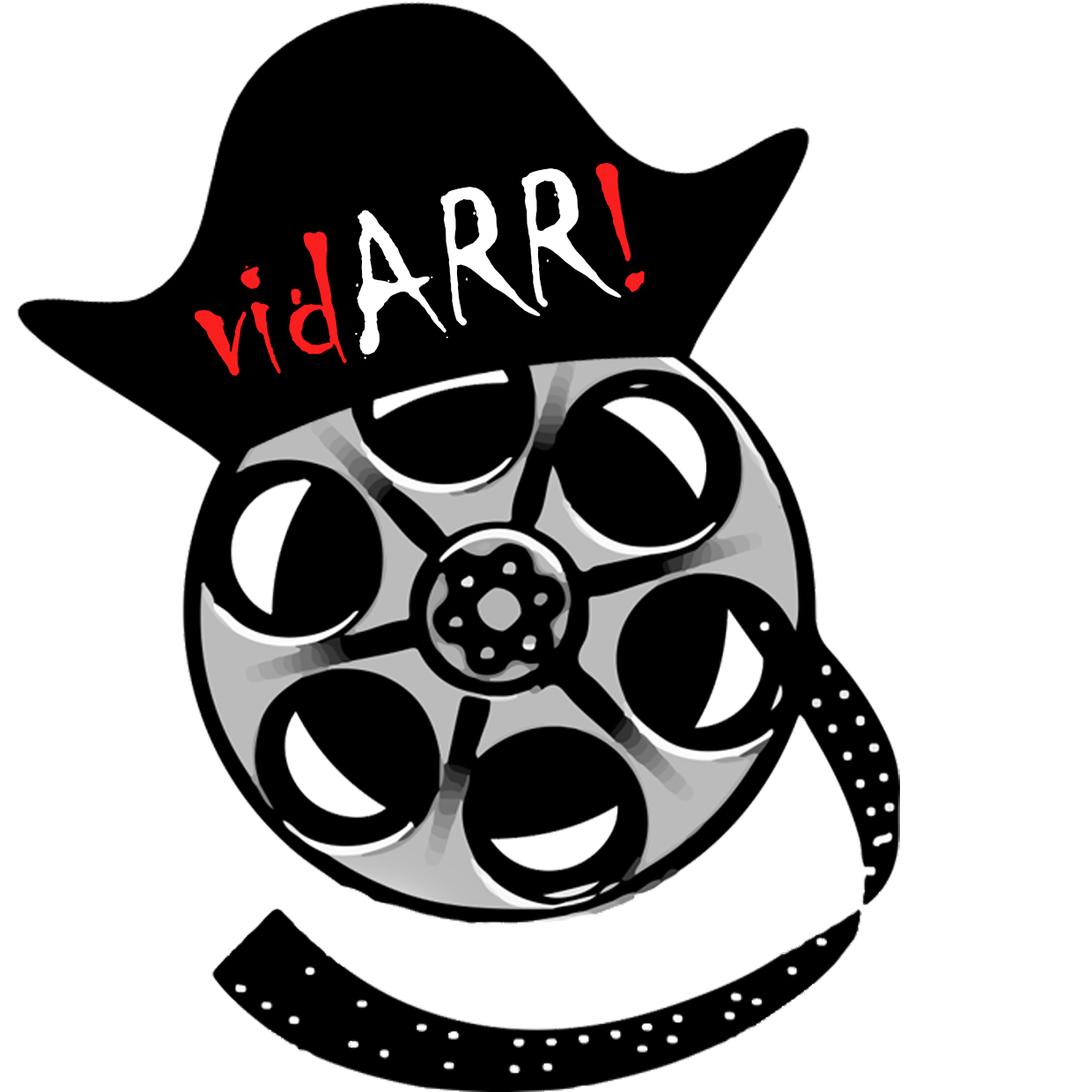
<style>
.page{position:relative;width:1092px;height:1092px;background:#ffffff}
.page>*{position:absolute;margin:0}
.t1{font:193.3px "Chiller-Regular";color:#f91f1f}
.t2{font:193.3px "Chiller-Regular";color:#ffffff}
</style>
<div class="page">
<p class="t1" style="left:194px;top:163px;width:451px;height:213px;rotate:-13deg">vid<span class="t2">ARR</span>!</p>
</div>
